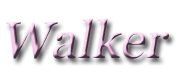
<style>
.page{position:relative;width:180px;height:80px;background:#ffffff}
.page>*{position:absolute;margin:0}
.t1{font:52px "Georgia";font-style:italic}
</style>
<div class="page">
<p class="t1" style="left:6px;top:18px;width:163px;height:41px">Walker</p>
</div>
